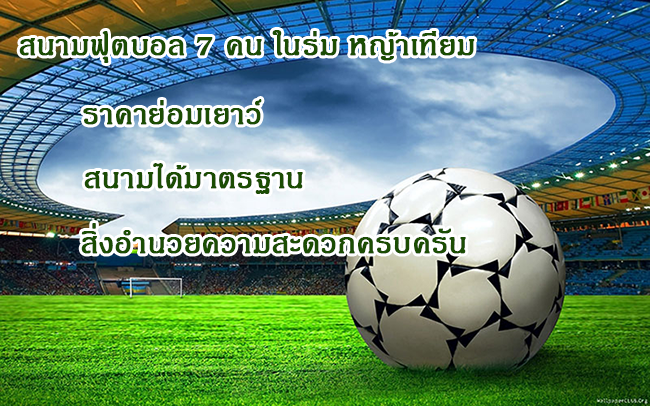
<style>
.page{position:relative;width:650px;height:406px}
.page>*{position:absolute;margin:0}
.t1{font:40px "JasmineUPC";color:#1b4c03;font-weight:bold}
</style>
<div class="page">
<p class="t1" style="left:19px;top:30px;width:456px;height:33px">สนามฟุตบอล 7 คน ในร่ม หญ้าเทียม</p>
<p class="t1" style="left:83px;top:99px;width:179px;height:26px">ราคาย่อมเยาว์</p>
<p class="t1" style="left:84px;top:163px;width:219px;height:31px">สนามได้มาตรฐาน</p>
<p class="t1" style="left:81px;top:223px;width:385px;height:31px">สิ่งอำนวยความสะดวกครบครัน</p>
</div>
